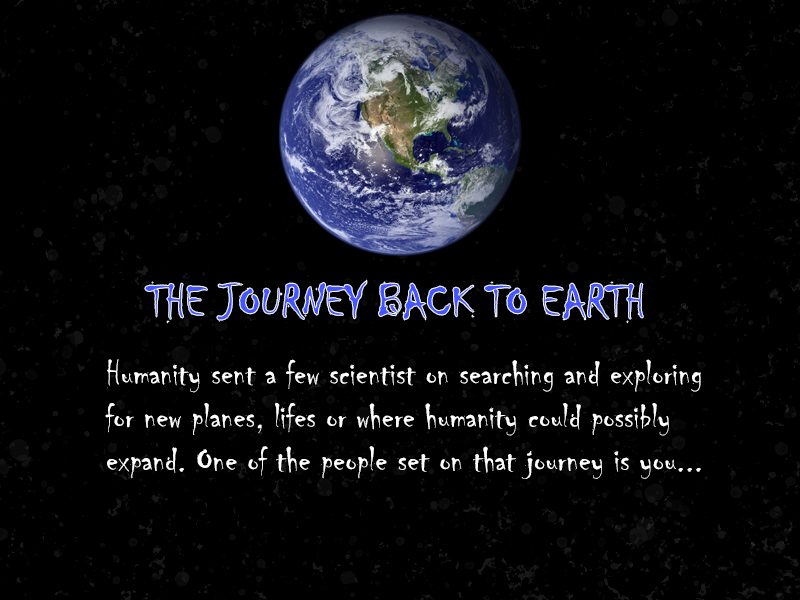
<style>
.page{position:relative;width:800px;height:600px;background:#000000}
.page>*{position:absolute;margin:0}
.t1{font:48px "Chiller-Regular";color:#4456ff}
.t2{font:36px "Chiller-Regular";color:#ffffff}
</style>
<div class="page">
<p class="t1" style="left:145px;top:280px;width:498px;height:43px">THE JOURNEY BACK TO EARTH</p>
<p class="t2" style="left:105px;top:359px;width:596px;height:120px">Humanity sent a few scientist on searching and exploring for new planes, lifes or where humanity could possibly expand. One of the people set on that journey is you...</p>
</div>
